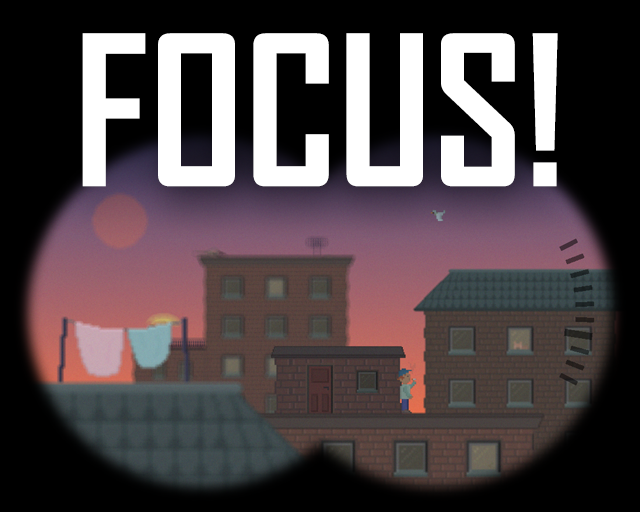
<style>
.page{position:relative;width:640px;height:512px;background:#000000}
.page>*{position:absolute;margin:0}
.t1{font:200px "AgencyFB-Bold";color:#ffffff}
</style>
<div class="page">
<p class="t1" style="left:82px;top:33px;width:476px;height:154px">FOCUS!</p>
</div>
